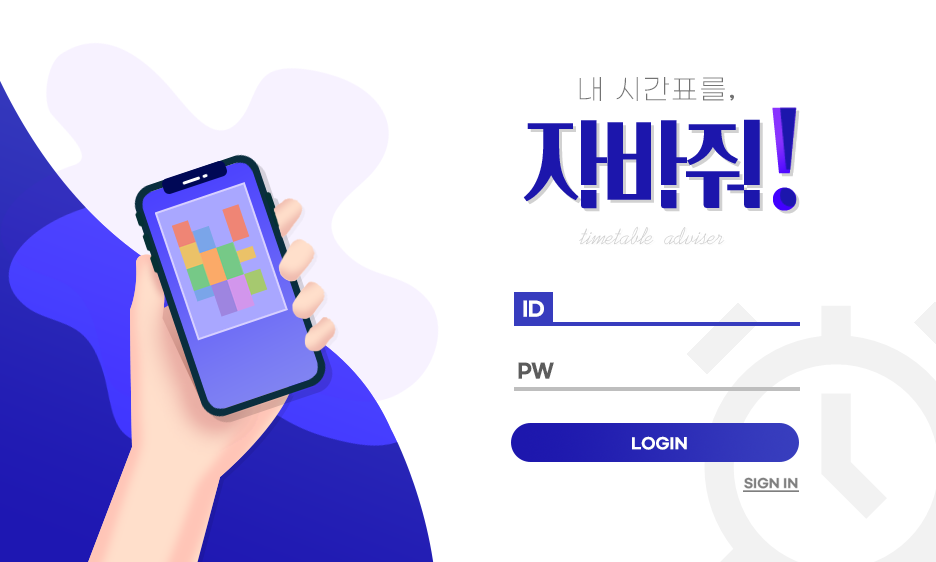
<style>
.page{position:relative;width:936px;height:562px;background:#ffffff}
.page>*{position:absolute;margin:0}
.t1{font:28px "GmarketSansLight";letter-spacing:0.05em;color:#737373}
.t2{font:28px "HYgsrB";letter-spacing:0.05em;color:#737373}
.t3{font:133.7px "Cafe24Dangdanghae"}
.t4{font:23.5px "TSTPenC";color:#cfcfcf}
.t5{font:20px "GmarketSansBold";letter-spacing:-0.05em;color:#ffffff}
.t6{font:20px "GmarketSansBold";letter-spacing:-0.05em;color:#5c5c5c}
.t7{font:15px "GmarketSansBold";color:#ffffff}
</style>
<div class="page">
<p class="t1" style="left:579px;top:77px;width:155px;height:24px">내 시간표를<span class="t2">,</span></p>
<p class="t3" style="left:772px;top:107px;width:24px;height:104px">!</p>
<p class="t4" style="left:579px;top:226px;width:146px;height:19px">timetable adviser</p>
<p class="t5" style="left:523px;top:300px;width:21px;height:17px">ID</p>
<p class="t6" style="left:518px;top:362px;width:36px;height:17px">PW</p>
<p class="t7" style="left:632px;top:436px;width:55px;height:14px">LOGIN</p>
</div>
